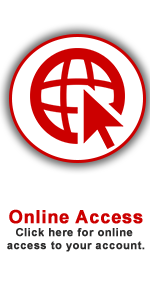
<style>
.page{position:relative;width:150px;height:300px;background:#ffffff}
.page>*{position:absolute;margin:0}
.t1{font:11px "Arial-BoldMT";letter-spacing:0.025em;color:#2d2c2c;font-weight:bold}
.t2{font:18px "Arial-BoldMT";letter-spacing:0.025em;color:#cc0000;font-weight:bold}
</style>
<div class="page">
<p class="t1" style="left:7px;top:209px;width:138px;height:43px;text-align:center"><span class="t2">Online Access<br></span>Click here for online <br>access to your account.</p>
</div>
